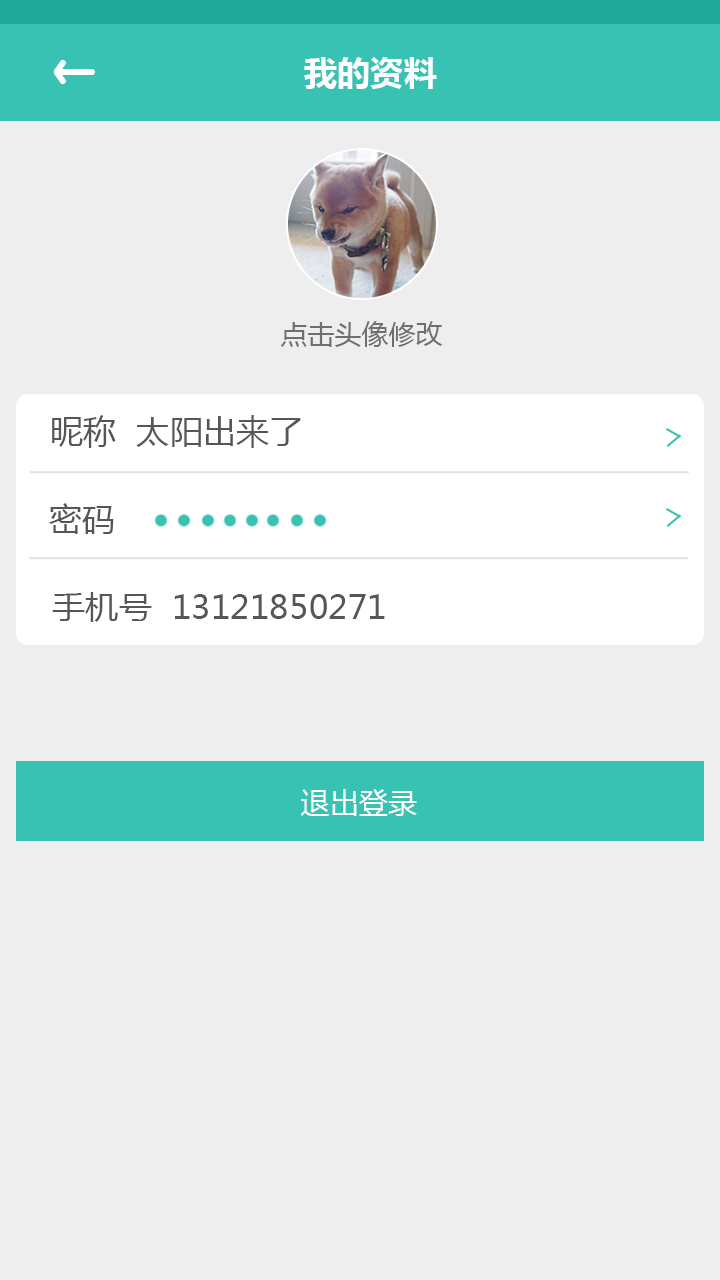
<style>
.page{position:relative;width:720px;height:1280px;background:#eeeeee}
.page>*{position:absolute;margin:0}
.t1{font:33.3px "MicrosoftYaHei-Bold";color:#fefefe}
.t2{font:27.1px "MicrosoftYaHei";color:#6e6e6e}
.t3{font:33.3px "MicrosoftYaHei";color:#565656}
.t4{font:29.2px "MicrosoftYaHei";color:#fefefe}
</style>
<div class="page">
<p class="t1" style="left:304px;top:57px;width:133px;height:32px">我的资料</p>
<p class="t2" style="left:281px;top:321px;width:162px;height:26px">点击头像修改</p>
<p class="t3" style="left:52px;top:415px;width:249px;height:33px">昵称  太阳出来了</p>
<p class="t3" style="left:49px;top:503px;width:65px;height:31px">密码</p>
<p class="t3" style="left:52px;top:592px;width:333px;height:30px">手机号  13121850271</p>
<p class="t4" style="left:301px;top:789px;width:116px;height:27px">退出登录</p>
</div>
